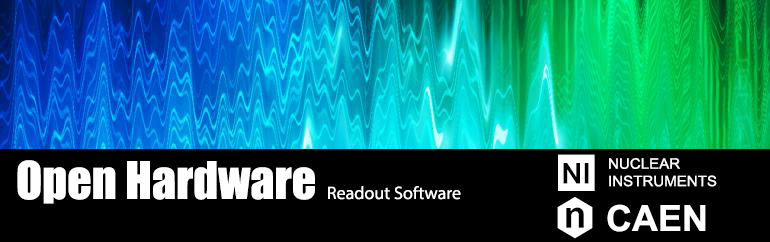
<style>
.page{position:relative;width:770px;height:242px;background:#000000}
.page>*{position:absolute;margin:0}
.t1{font:18px "MyriadPro-Regular";color:#ffffff}
.t2{font:48px "Impact";color:#ffffff}
.t3{font:42.3px "NIFont";color:#ffffff}
.t4{font:14.5px "ArialMT";color:#ffffff;scale:1.04 1}
.t5{font:44px "NIFont";color:#ffffff}
.t6{font:36px "Arial-BoldMT";color:#ffffff}
</style>
<div class="page">
<p class="t1" style="left:17px;top:160px;width:444px;height:44px"><span class="t2">Open Hardware    </span>Readout Software</p>
<p class="t3" style="left:558px;top:154px;width:37px;height:37px">N</p>
<p class="t4" style="left:609px;top:158px;width:108px;height:29px">NUCLEAR<br>INSTRUMENTS</p>
<p class="t5" style="left:557px;top:197px;width:36px;height:42px">C</p>
<p class="t6" style="left:607px;top:204px;width:99px;height:28px">CAEN</p>
</div>
